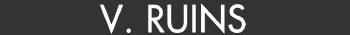
<style>
.page{position:relative;width:350px;height:35px;background:#333333}
.page>*{position:absolute;margin:0}
.t1{font:35px "Futura";color:#ffffff;font-weight:bold}
</style>
<div class="page">
<p class="t1" style="left:99px;top:3px;width:147px;height:31px">V. RUINS</p>
</div>
